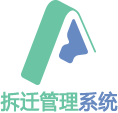
<style>
.page{position:relative;width:118px;height:113px;background:#ffffff}
.page>*{position:absolute;margin:0}
.t1{font:20px "MicrosoftYaHei";color:#6bc5a4;font-weight:bold;scale:0.95 1}
.t2{font:20px "MicrosoftYaHei";color:#698ac0;font-weight:bold;scale:0.95 1}
</style>
<div class="page">
<p class="t1" style="left:0px;top:91px;width:118px;height:21px">拆迁管理<span class="t2">系统</span></p>
</div>
